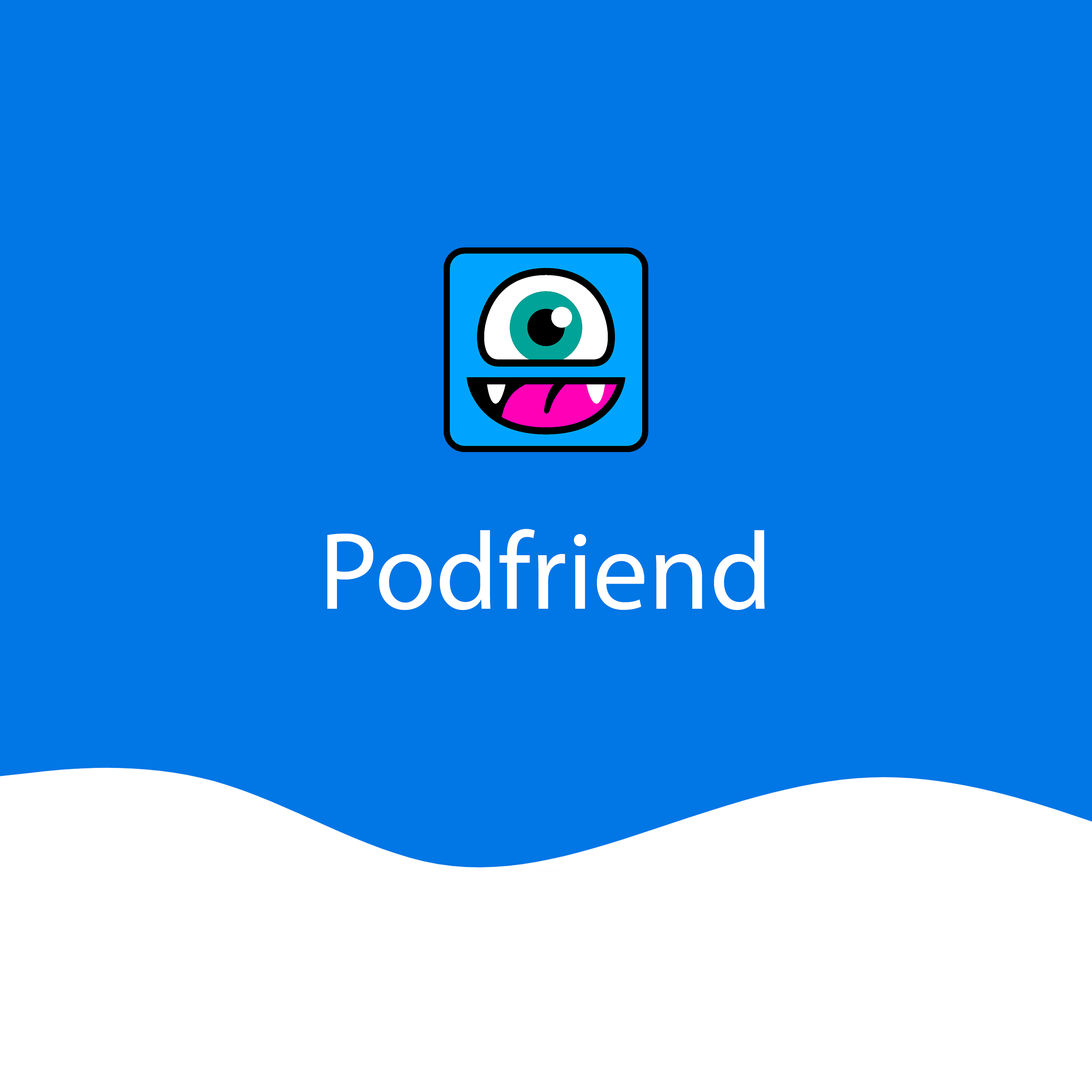
<style>
.page{position:relative;width:1092px;height:1092px;background:#0176e5}
.page>*{position:absolute;margin:0}
.t1{font:110.6px "MyriadPro-Regular";color:#ffffff}
</style>
<div class="page">
<p class="t1" style="left:327px;top:529px;width:438px;height:81px">Podfriend</p>
</div>
